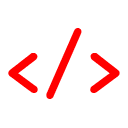
<style>
.page{position:relative;width:128px;height:128px;background:#ffffff}
.page>*{position:absolute;margin:0}
.t1{font:83.3px "Chalkboard";color:#ff0000}
</style>
<div class="page">
<p class="t1" style="left:8px;top:28px;width:112px;height:71px">&lt;/&gt;</p>
</div>
